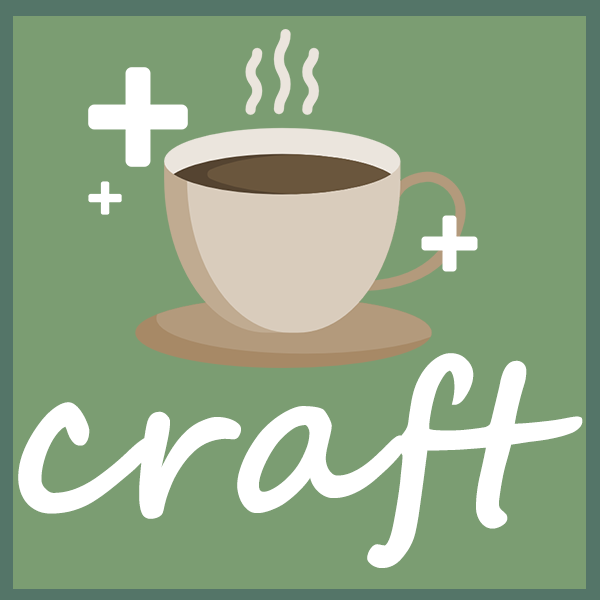
<style>
.page{position:relative;width:600px;height:600px;background:#7b9d72}
.page>*{position:absolute;margin:0}
.t1{font:214px "SegoeScript-Bold";color:#ffffff}
</style>
<div class="page">
<p class="t1" style="left:18px;top:353px;width:565px;height:215px">craft</p>
</div>
